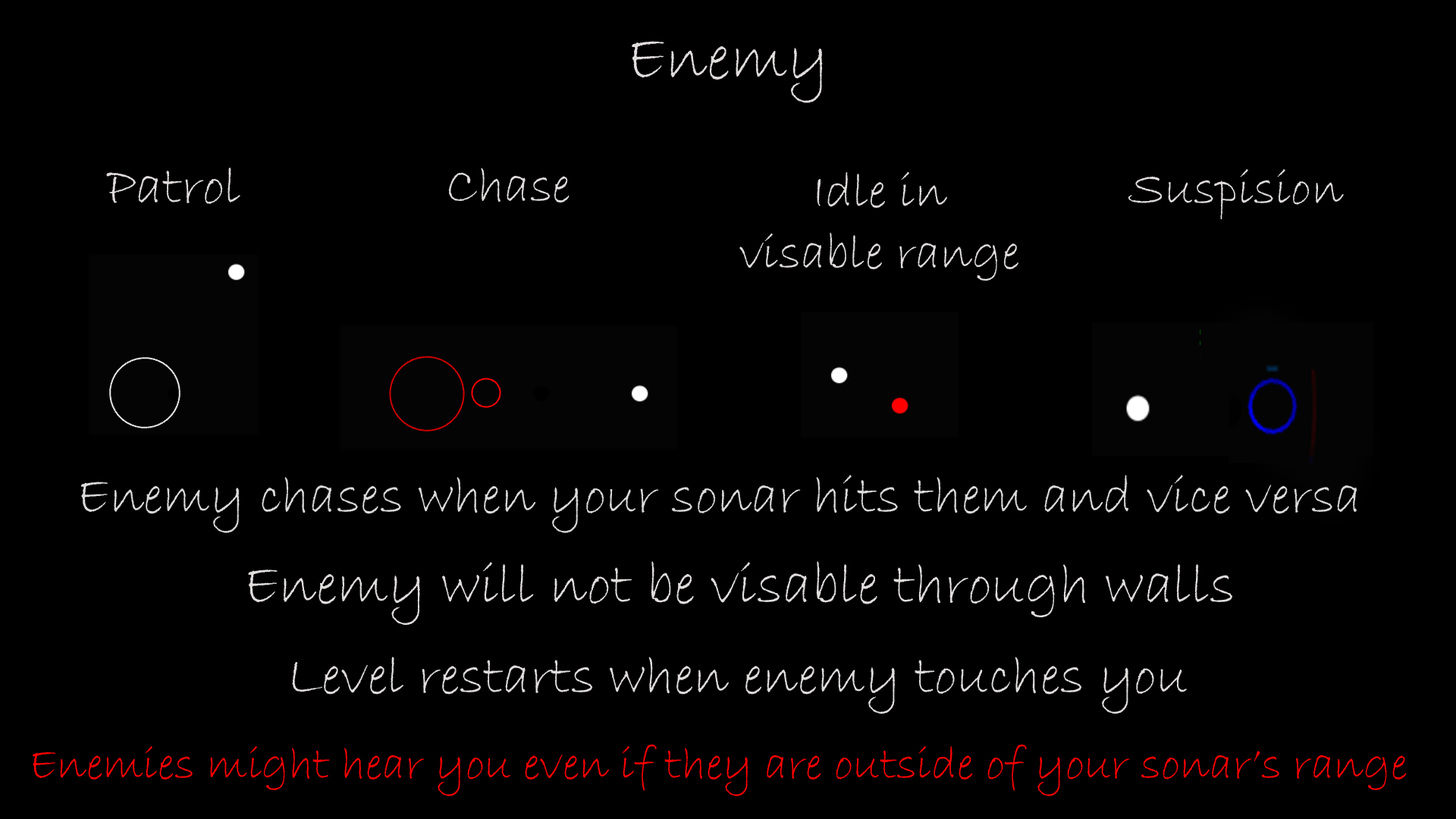
<style>
.page{position:relative;width:1456px;height:819px;background:#000000}
.page>*{position:absolute;margin:0}
.t1{font:66px "BradleyHandITC";color:#e1dddd}
.t2{font:54.6px "BradleyHandITC";color:#e1dddd}
.t3{font:51.7px "BradleyHandITC";color:#e1dddd}
.t4{font:50.8px "BradleyHandITC";color:#e1dddd}
.t5{font:50.5px "BradleyHandITC";color:#e1dddd}
.t6{font:54.6px "BradleyHandITC";color:#dcdbdb}
.t7{font:59.3px "BradleyHandITC";color:#e1dddd}
.t8{font:55.6px "BradleyHandITC";color:#e1dddd}
.t9{font:47px "BradleyHandITC";color:#ff0000}
</style>
<div class="page">
<p class="t1" style="left:632px;top:41px;width:191px;height:62px">Enemy</p>
<p class="t2" style="left:106px;top:168px;width:134px;height:36px">Patrol</p>
<p class="t3" style="left:448px;top:168px;width:122px;height:35px">Chase</p>
<p class="t4" style="left:739px;top:171px;width:279px;height:110px;text-align:center">Idle in<br>visable range</p>
<p class="t5" style="left:1128px;top:169px;width:216px;height:51px">Suspision</p>
<p class="t6" style="left:80px;top:475px;width:1277px;height:58px">Enemy chases when your sonar hits them and vice versa</p>
<p class="t7" style="left:248px;top:561px;width:985px;height:65px">Enemy will not be visable through walls</p>
<p class="t8" style="left:292px;top:657px;width:895px;height:57px">Level restarts when enemy touches you</p>
<p class="t9" style="left:33px;top:744px;width:1374px;height:52px">Enemies might hear you even if they are outside of your sonar’s range</p>
</div>
